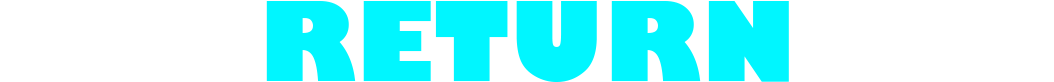
<style>
.page{position:relative;width:1054px;height:82px;background:#ffffff}
.page>*{position:absolute;margin:0}
.t1{font:108.3px "GillSans-UltraBold";color:#00f6ff}
</style>
<div class="page">
<p class="t1" style="left:266px;top:1px;width:523px;height:81px">RETURN</p>
</div>
